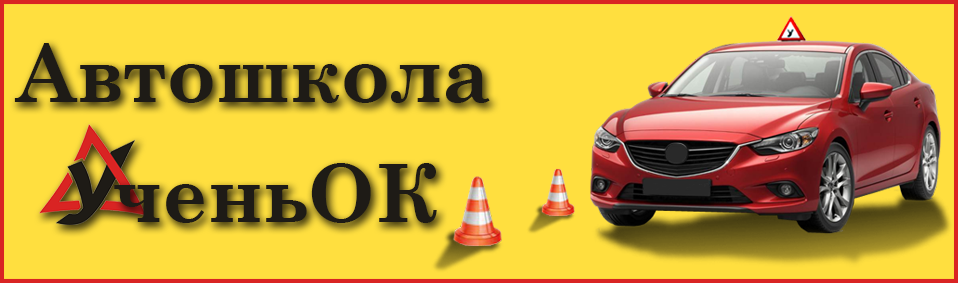
<style>
.page{position:relative;width:958px;height:283px;background:#ffdf3f}
.page>*{position:absolute;margin:0}
.t1{font:80px "CenturySchoolbook-Bold";color:#1e1b16}
</style>
<div class="page">
<p class="t1" style="left:14px;top:43px;width:476px;height:60px">Автошкола</p>
<p class="t1" style="left:114px;top:163px;width:323px;height:60px">ченьОК</p>
</div>
